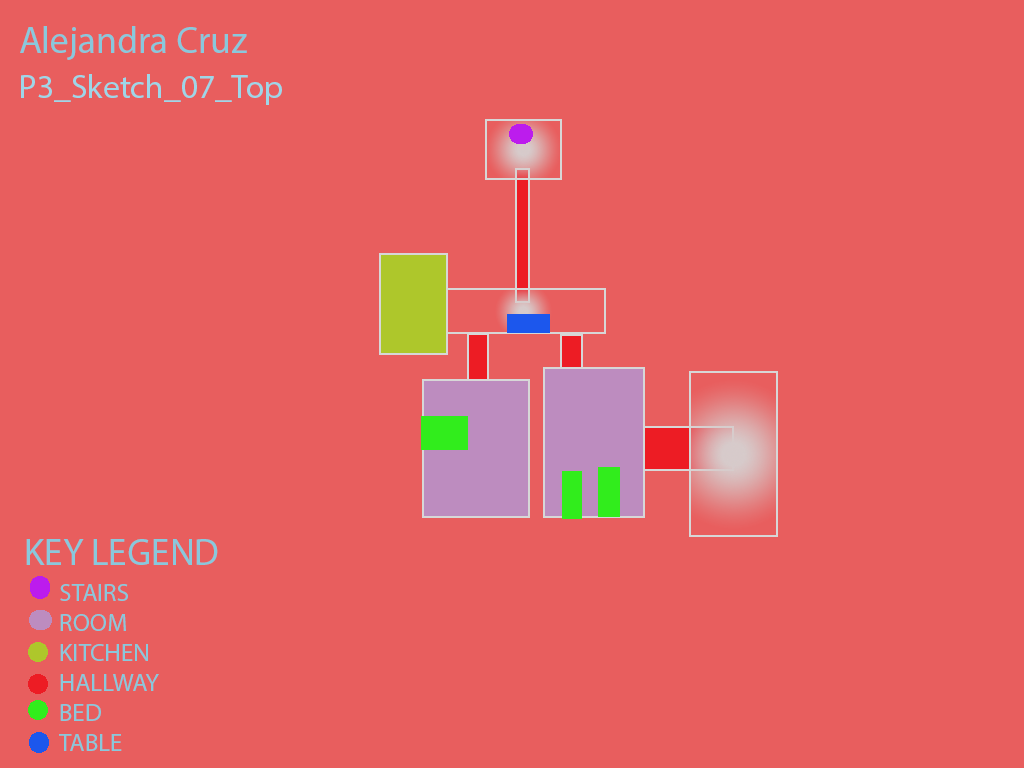
<style>
.page{position:relative;width:1024px;height:768px;background:#e85e5e}
.page>*{position:absolute;margin:0}
.t1{font:37.5px "MyriadPro-Regular";color:#89c8dc}
.t2{font:33.3px "MyriadPro-Regular";color:#9ed6e8}
.t3{font:25px "MyriadPro-Regular";color:#89c8dc}
</style>
<div class="page">
<p class="t1" style="left:20px;top:26px;width:227px;height:34px">Alejandra Cruz</p>
<p class="t2" style="left:21px;top:74px;width:261px;height:31px">P3_Sketch_07_Top</p>
<p class="t1" style="left:26px;top:539px;width:192px;height:26px">KEY LEGEND</p>
<p class="t3" style="left:59px;top:584px;width:100px;height:167px">STAIRS<br>ROOM<br>KITCHEN<br>HALLWAY<br>BED<br>TABLE</p>
</div>
